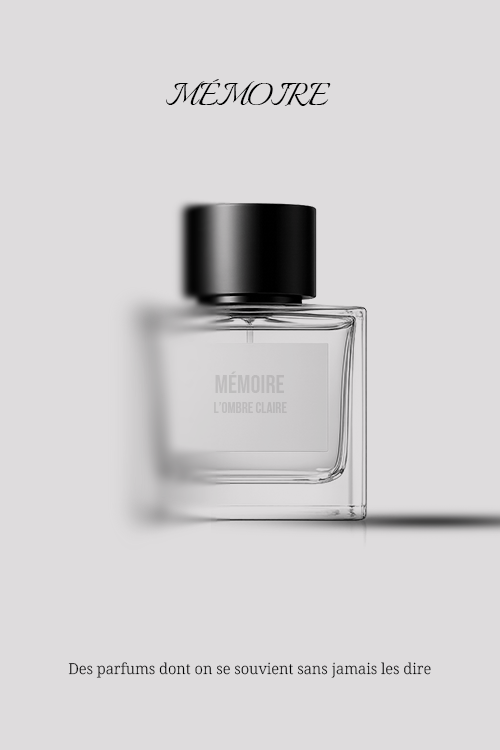
<style>
.page{position:relative;width:500px;height:750px;background:#dedcdd}
.page>*{position:absolute;margin:0}
.t1{font:38.4px "Italianno-Regular";color:#000000}
.t2{font:25px "BebasNeue-Regular";color:#bdbbbc}
.t3{font:15px "BebasNeue-Regular";color:#bcbabb}
.t4{font:15px "NotoSerif-Light";color:#000000}
</style>
<div class="page">
<p class="t1" style="left:166px;top:79px;width:165px;height:27px">MÉMOIRE</p>
<p class="t2" style="left:215px;top:371px;width:69px;height:22px">MÉMOIRE</p>
<p class="t3" style="left:214px;top:402px;width:73px;height:11px">L’OMBRE CLAIRE</p>
<p class="t4" style="left:68px;top:662px;width:363px;height:16px">Des parfums dont on se souvient sans jamais les dire</p>
</div>
